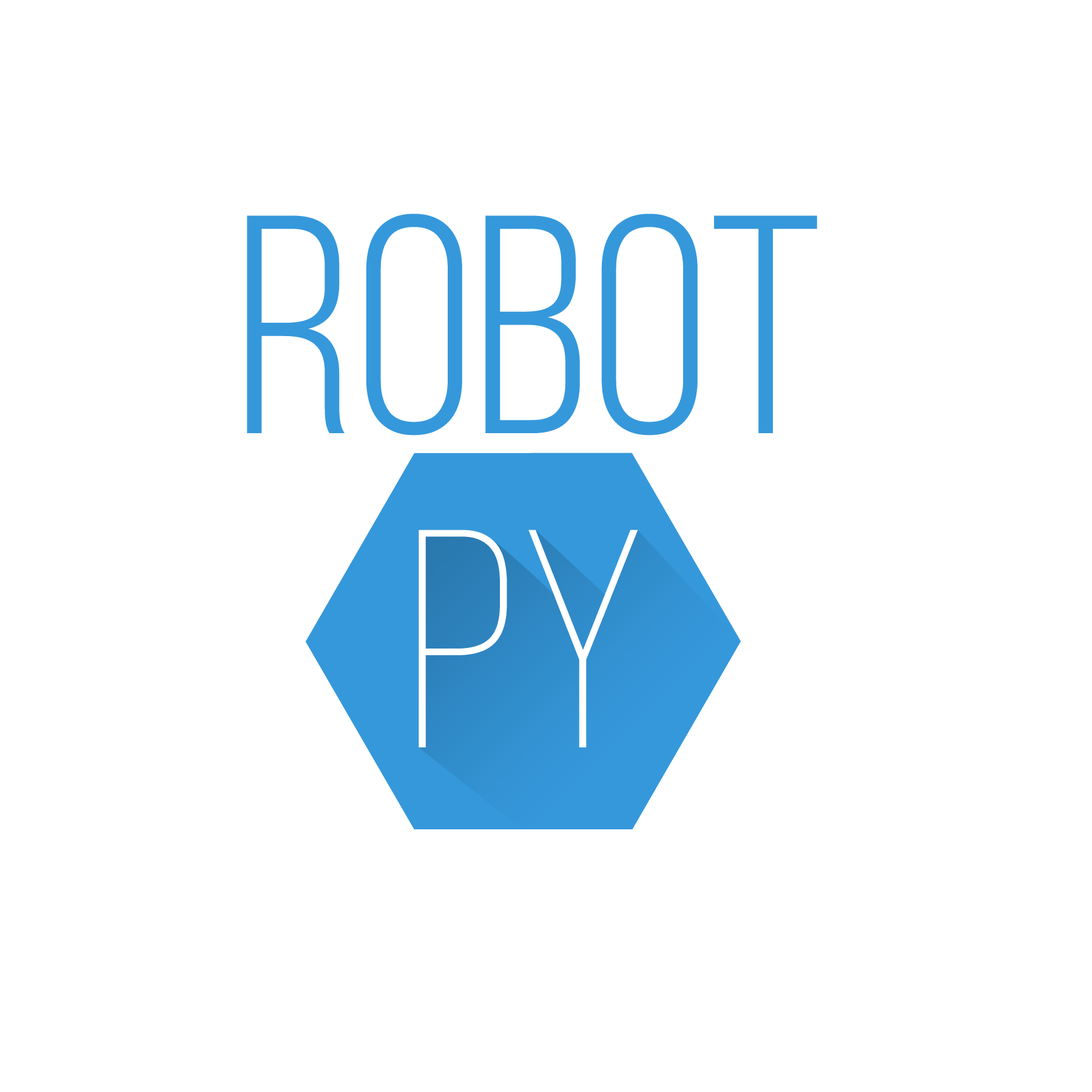
<style>
.page{position:relative;width:1092px;height:1092px;background:#ffffff}
.page>*{position:absolute;margin:0}
.t1{font:310.6px "BebasNeueBook";color:#3598db}
.t2{font:310.6px "BebasNeueLight";color:#ffffff}
</style>
<div class="page">
<p class="t1" style="left:247px;top:214px;width:570px;height:222px">ROBOT</p>
<p class="t2" style="left:419px;top:530px;width:219px;height:217px">PY</p>
</div>
